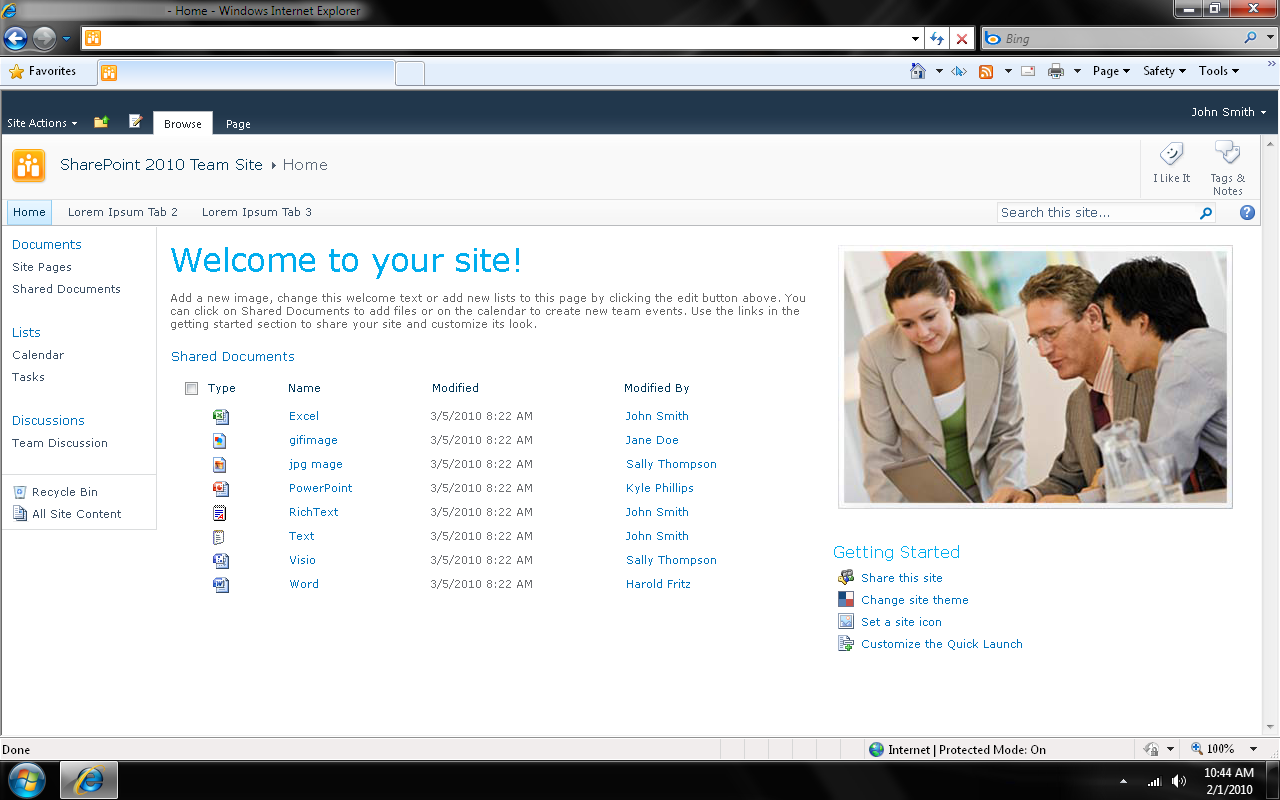
<style>
.page{position:relative;width:1280px;height:800px;background:#ffffff}
.page>*{position:absolute;margin:0}
.t1{font:11px "Verdana";color:#ffffff}
.t2{font:11px "SegoeUI";color:#ffffff}
.t3{font:11px "SegoeUI";color:#23272c}
.t4{font:15px "Verdana";color:#003759}
.t5{font:15px "Verdana";color:#5d6878}
.t6{font:11px "SegoeUI";color:#5d6878}
.t7{font:11px/13px "SegoeUI";color:#5d6878}
.t8{font:11px "Verdana";color:#003759}
.t9{font:11px "Verdana";color:#3b4f65}
.t10{font:12px "Verdana";color:#476382}
.t11{font:11px/22px "Verdana";color:#3b4f65}
.t12{font:12px/12px "Verdana";color:#0072bc}
.t13{font:12px/44px "Verdana";color:#0072bc}
.t14{font:33px "Verdana";letter-spacing:-0.02em;color:#00adee}
.t15{font:11px/13px "Verdana";color:#676767}
.t16{font:13px "Verdana";color:#0072bc}
.t17{font:11px/24px "Verdana";color:#0072bc}
.t18{font:11px/24px "Verdana";color:#6d6f72}
.t19{font:16px "Verdana";color:#00adee}
.t20{font:11px/22px "Verdana";color:#0072bc}
</style>
<div class="page">
<p class="t1" style="left:1192px;top:107px;width:62px;height:9px">John Smith</p>
<p class="t2" style="left:8px;top:119px;width:58px;height:8px">Site Actions</p>
<p class="t3" style="left:165px;top:120px;width:36px;height:8px">Browse</p>
<p class="t2" style="left:227px;top:120px;width:23px;height:10px">Page</p>
<p class="t4" style="left:61px;top:158px;width:201px;height:12px">SharePoint 2010 Team Site</p>
<p class="t5" style="left:284px;top:159px;width:43px;height:11px">Home</p>
<p class="t6" style="left:1154px;top:174px;width:36px;height:8px">I Like It</p>
<p class="t7" style="left:1211px;top:174px;width:34px;height:21px;text-align:center">Tags &amp;<br>Notes</p>
<p class="t8" style="left:14px;top:208px;width:31px;height:8px">Home</p>
<p class="t9" style="left:69px;top:207px;width:108px;height:11px">Lorem Ipsum Tab 2</p>
<p class="t9" style="left:203px;top:207px;width:108px;height:11px">Lorem Ipsum Tab 3</p>
<p class="t10" style="left:1002px;top:207px;width:107px;height:10px">Search this site...</p>
<p class="t11" style="left:12px;top:240px;width:108px;height:207px"><span class="t12">Documents<br></span>Site Pages<br>Shared Documents<br><span class="t13">Lists<br></span>Calendar<br>Tasks<br><span class="t13">Discussions<br></span>Team Discussion</p>
<p class="t14" style="left:171px;top:247px;width:348px;height:32px">Welcome to your site!</p>
<p class="t15" style="left:171px;top:293px;width:634px;height:37px">Add a new image, change this welcome text or add new lists to this page by clicking the edit button above. You <br>can click on Shared Documents to add files or on the calendar to create new team events. Use the links in the <br>getting started section to share your site and customize its look.</p>
<p class="t16" style="left:172px;top:351px;width:122px;height:10px">Shared Documents</p>
<p class="t8" style="left:208px;top:383px;width:481px;height:11px">Type    Name     Modified         Modified By</p>
<p class="t17" style="left:289px;top:411px;width:63px;height:177px">Excel<br>gifimage<br>jpg mage<br>PowerPoint<br>RichText<br>Text<br>Visio<br>Word</p>
<p class="t18" style="left:431px;top:411px;width:101px;height:178px">3/5/2010 8:22 AM<br>3/5/2010 8:22 AM<br>3/5/2010 8:22 AM<br>3/5/2010 8:22 AM<br>3/5/2010 8:22 AM<br>3/5/2010 8:22 AM<br>3/5/2010 8:22 AM<br>3/5/2010 8:22 AM</p>
<p class="t17" style="left:626px;top:411px;width:90px;height:177px">John Smith<br>Jane Doe<br>Sally Thompson<br>Kyle Phillips<br>John Smith<br>John Smith<br>Sally Thompson<br>Harold Fritz</p>
<p class="t9" style="left:33px;top:487px;width:64px;height:11px">Recycle Bin</p>
<p class="t9" style="left:33px;top:509px;width:88px;height:9px">All Site Content</p>
<p class="t19" style="left:834px;top:545px;width:125px;height:16px">Getting Started</p>
<p class="t20" style="left:862px;top:573px;width:160px;height:77px">Share this site<br>Change site theme<br>Set a site icon<br>Customize the Quick Launch</p>
</div>
